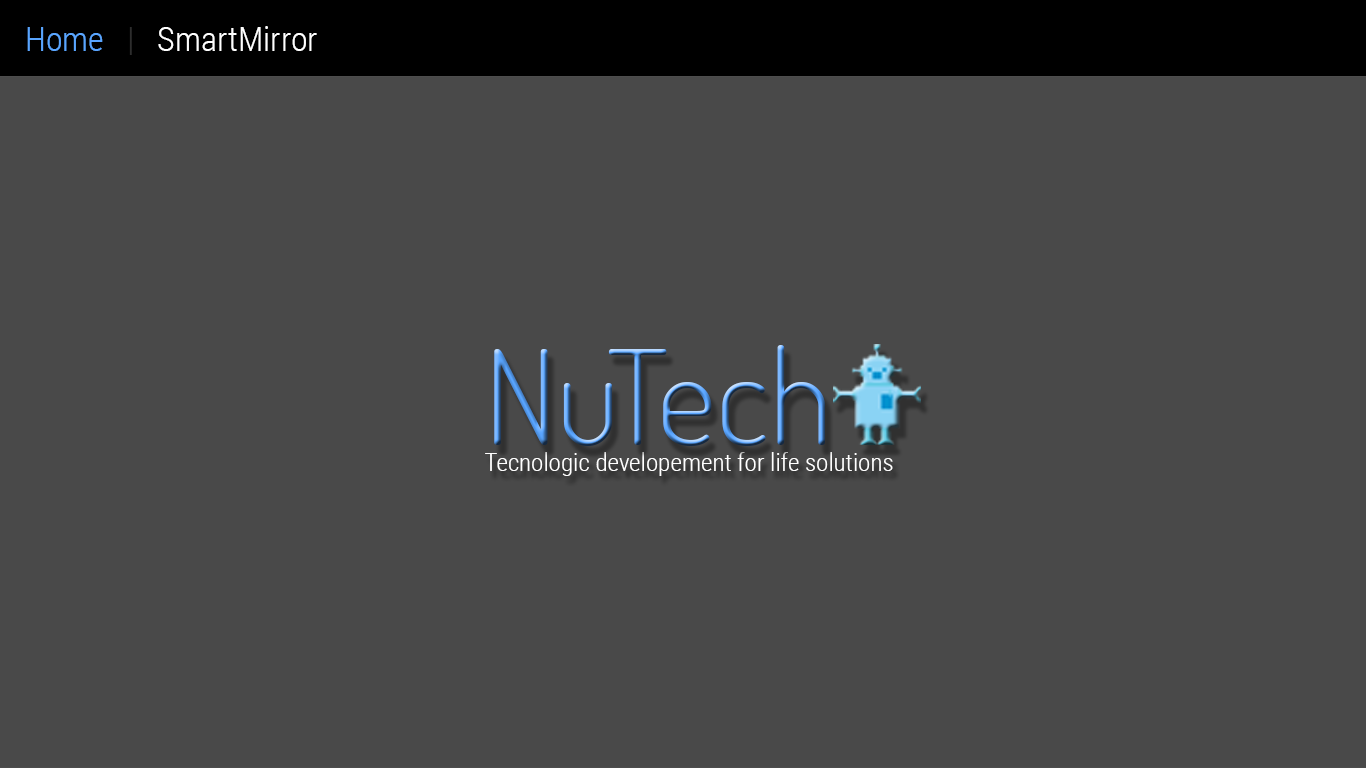
<style>
.page{position:relative;width:1366px;height:768px;background:#494949}
.page>*{position:absolute;margin:0}
.t1{font:34px "RobotoCondensed-Light";color:#ffffff}
.t2{font:34px "RobotoCondensed-Light";color:#59a5ff}
.t3{font:34px "RobotoCondensed-Light";color:#2d2d2d}
.t4{font:131.2px "Dosis-Light"}
.t5{font:25px "RobotoCondensed-Light";color:#ffffff}
</style>
<div class="page">
<p class="t1" style="left:27px;top:26px;width:290px;height:29px"><span class="t2">Home   </span><span class="t3">|   </span>SmartMirror</p>
<p class="t4" style="left:494px;top:345px;width:331px;height:101px">NuTech</p>
<p class="t5" style="left:485px;top:452px;width:408px;height:24px">Tecnologic developement for life solutions</p>
</div>
